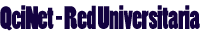
<style>
.page{position:relative;width:200px;height:38px;background:#ffffff}
.page>*{position:absolute;margin:0}
.t1{font:30.5px "PoplarStd";letter-spacing:-0.025em;color:#130240;scale:0.89 1}
</style>
<div class="page">
<p class="t1" style="left:0px;top:5px;width:200px;height:26px">QciNet - Red Universitaria</p>
</div>
